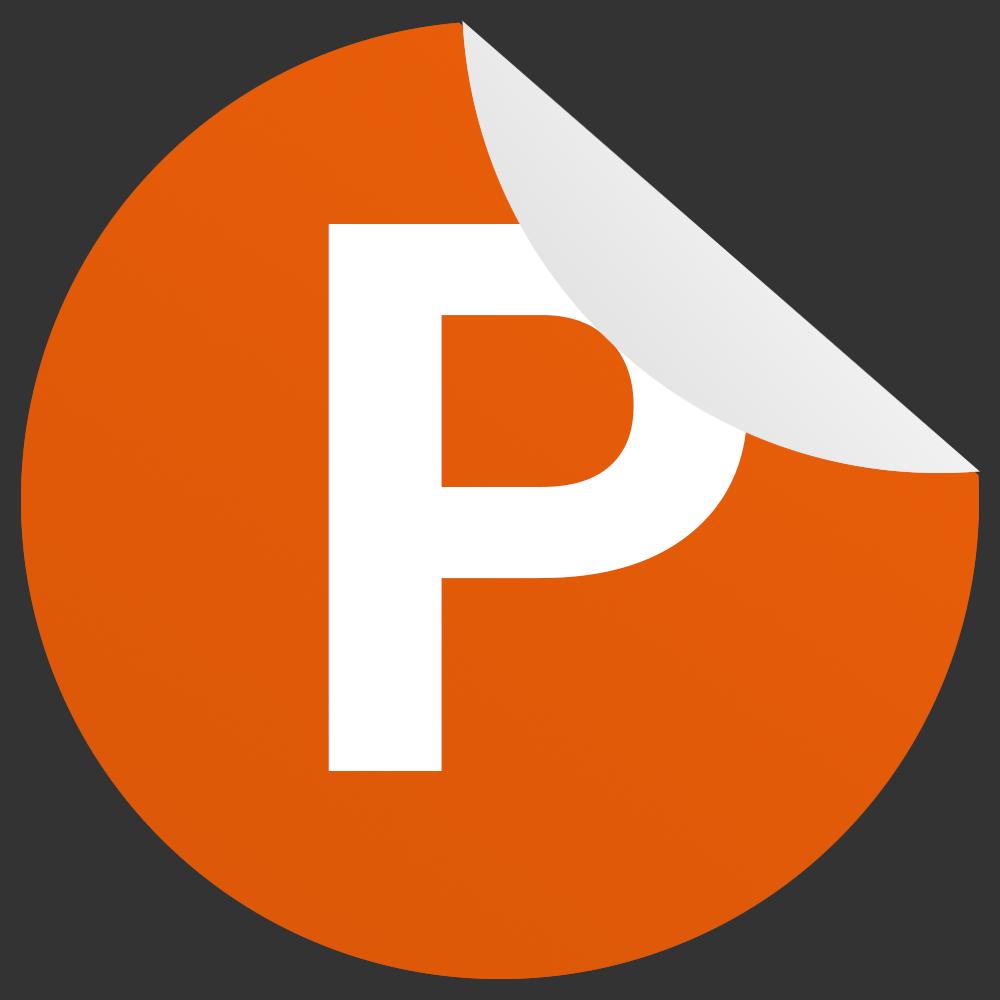
<style>
.page{position:relative;width:1000px;height:1000px;background:#333333}
.page>*{position:absolute;margin:0}
.t1{font:768.8px "Roboto-Bold";color:#ffffff}
</style>
<div class="page">
<p class="t1" style="left:328px;top:224px;width:420px;height:547px">P</p>
</div>
